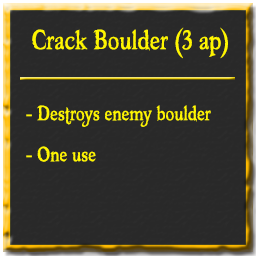
<style>
.page{position:relative;width:256px;height:256px;background:#292929}
.page>*{position:absolute;margin:0}
.t1{font:40px "Booter-ZeroZero";color:#fff600}
.t2{font:30px "Booter-ZeroZero";color:#fff600}
</style>
<div class="page">
<p class="t1" style="left:32px;top:27px;width:196px;height:32px">Crack Boulder (3 ap)</p>
<p class="t2" style="left:26px;top:105px;width:185px;height:22px">- Destroys enemy boulder</p>
<p class="t2" style="left:26px;top:146px;width:70px;height:16px">- One use</p>
</div>
